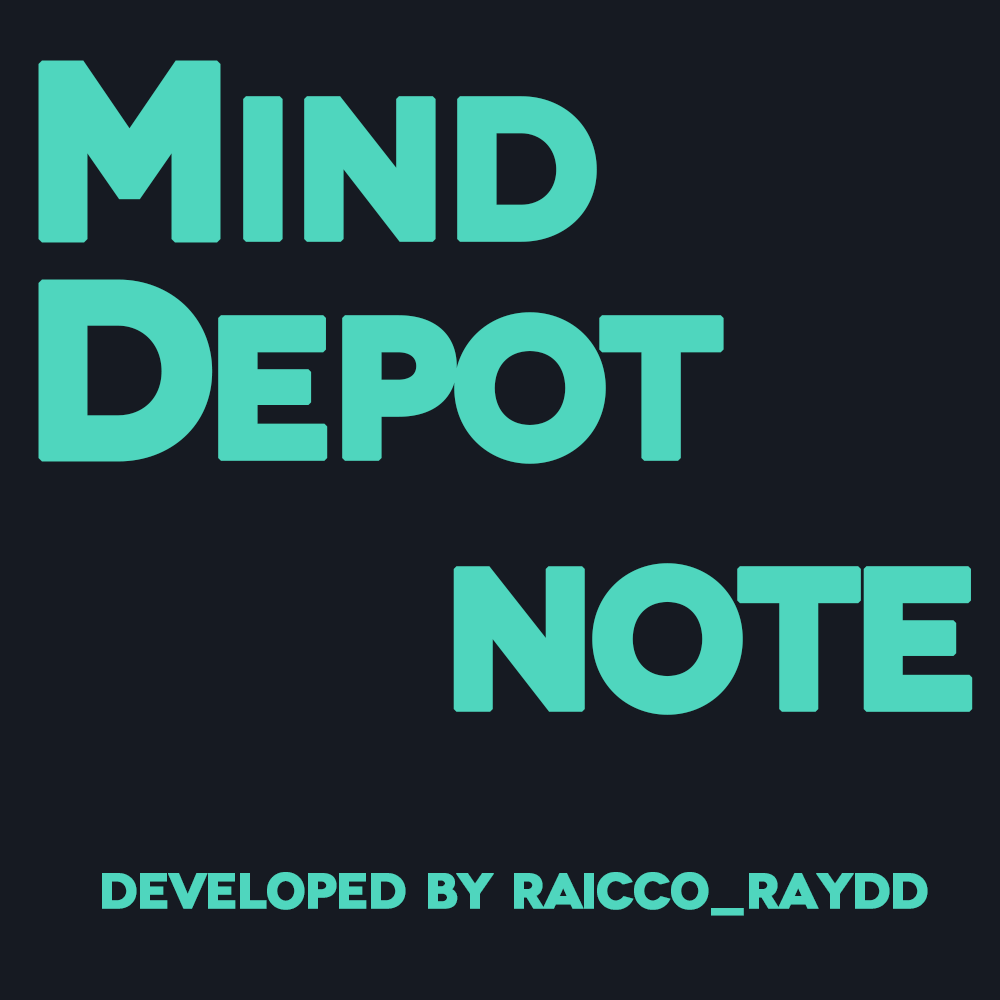
<style>
.page{position:relative;width:1000px;height:1000px;background:#161a22}
.page>*{position:absolute;margin:0}
.t1{font:200.7px "Novecentowide-Bold";letter-spacing:-0.05em;color:#4fd6be;text-transform:uppercase;font-weight:bold}
.t2{font:250px "Novecentowide-Bold";letter-spacing:-0.05em;color:#4fd6be;text-transform:uppercase;font-weight:bold}
.t3{font:200.7px "Novecentowide-Bold";letter-spacing:-0.075em;color:#4fd6be;text-transform:uppercase;font-weight:bold}
.t4{font:250px "Novecentowide-Bold";letter-spacing:-0.075em;color:#4fd6be;text-transform:uppercase;font-weight:bold}
.t5{font:200px "Novecentowide-Bold";letter-spacing:-0.075em;color:#4fd6be;text-transform:uppercase;font-weight:bold}
.t6{font:50px "Novecentowide-Bold";letter-spacing:-0.05em;color:#4fd6be;text-transform:uppercase;font-weight:bold}
</style>
<div class="page">
<p class="t1" style="left:38px;top:60px;width:559px;height:183px"><span class="t2">m</span>ind</p>
<p class="t3" style="left:38px;top:279px;width:686px;height:185px"><span class="t4">d</span>epot</p>
<p class="t5" style="left:453px;top:563px;width:520px;height:152px">note</p>
<p class="t6" style="left:102px;top:872px;width:826px;height:44px">DEVELOPED BY RAICCO_RAYDD</p>
</div>
